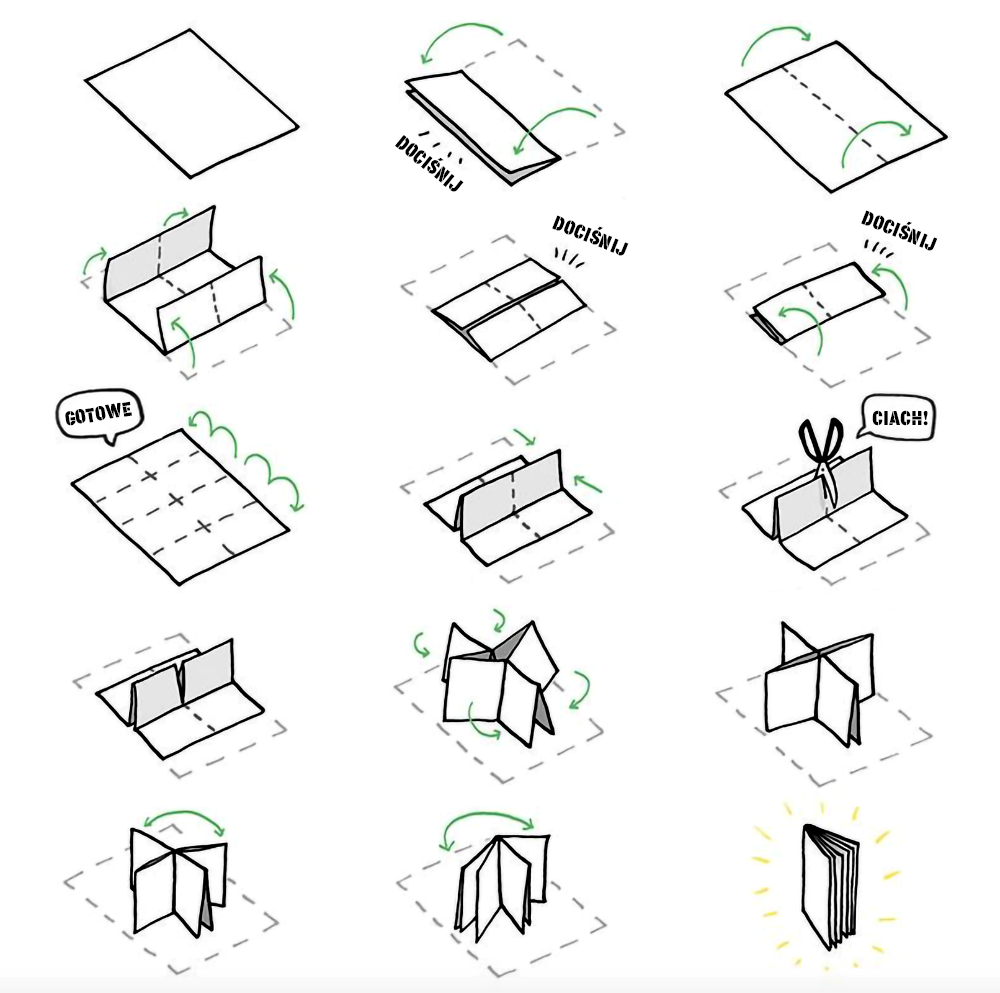
<style>
.page{position:relative;width:1000px;height:993px;background:#ffffff}
.page>*{position:absolute;margin:0}
.t1{font:19.9px "KorolevMilitaryStencil";color:#000000}
</style>
<div class="page">
<p class="t1" style="left:395px;top:135px;width:69px;height:57px;rotate:39deg">DOCIŚNIJ</p>
<p class="t1" style="left:552px;top:215px;width:77px;height:41px;rotate:22deg">DOCIŚNIJ</p>
<p class="t1" style="left:861px;top:210px;width:77px;height:41px;rotate:22deg">DOCIŚNIJ</p>
<p class="t1" style="left:65px;top:401px;width:67px;height:25px;rotate:-9deg">GOTOWE</p>
<p class="t1" style="left:872px;top:410px;width:56px;height:16px">CIACH!</p>
</div>
